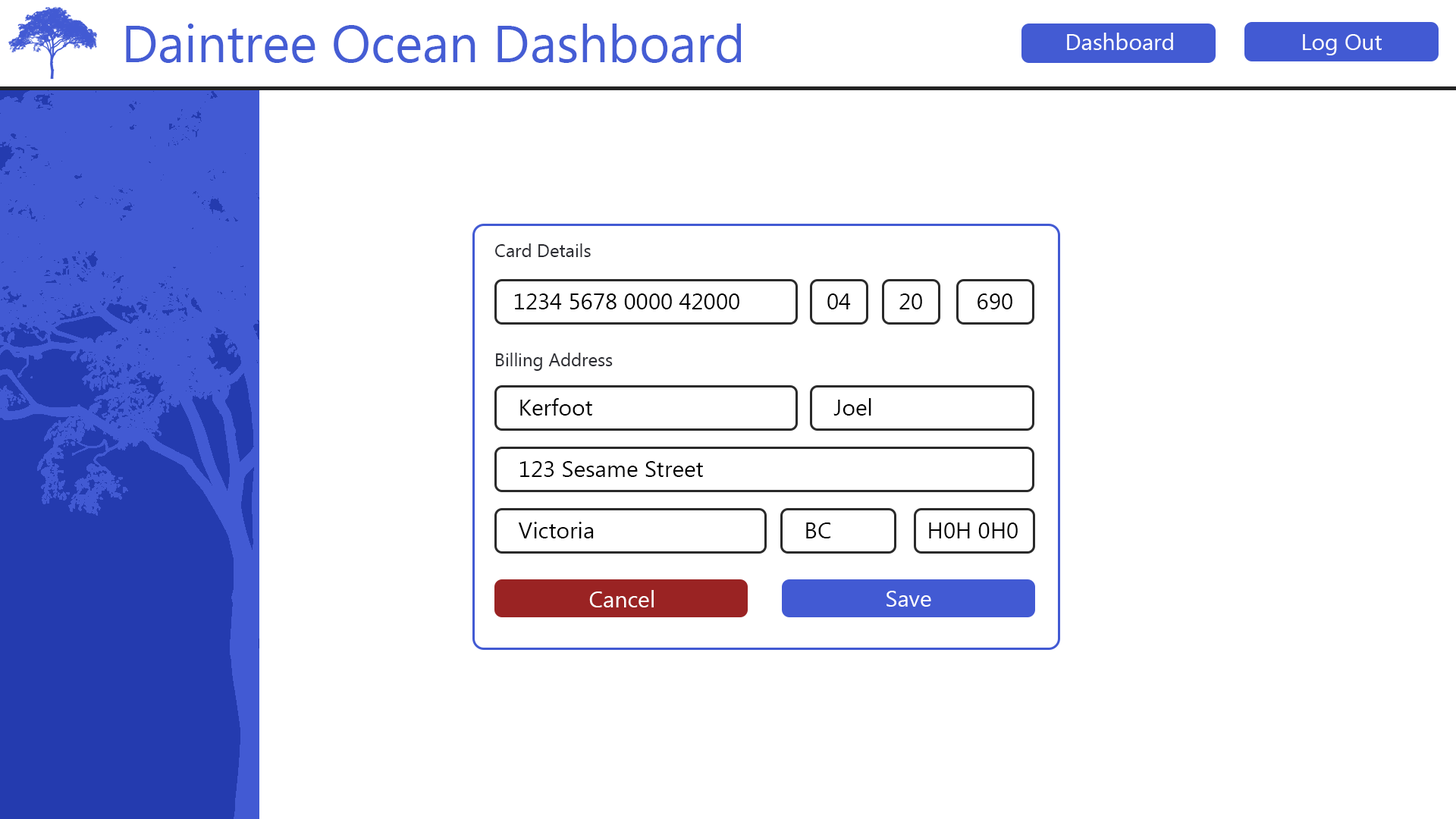
<style>
.page{position:relative;width:1456px;height:819px;background:#ffffff}
.page>*{position:absolute;margin:0}
.t1{font:52.3px "MyanmarText";color:#455dd4}
.t2{font:22.7px "MyanmarText";color:#ffffff}
.t3{font:18.2px "MyanmarText";color:#2c2d33}
.t4{font:22.7px "MyanmarText";color:#2c2d33}
.t5{font:22.7px "MyanmarText";color:#000000}
.t6{font:4.5px "MyanmarText";color:#656568}
</style>
<div class="page">
<p class="t1" style="left:126px;top:24px;width:615px;height:39px">Daintree Ocean Dashboard</p>
<p class="t2" style="left:1067px;top:33px;width:106px;height:17px">Dashboard</p>
<p class="t2" style="left:1303px;top:34px;width:79px;height:21px">Log Out</p>
<p class="t3" style="left:495px;top:243px;width:118px;height:128px"><span class="t4"> <br></span> Card Details<br><br><br> <br><br> Billing Address</p>
<p class="t5" style="left:515px;top:293px;width:224px;height:16px"><span class="t6"><br>   </span>1234 5678 0000 42000</p>
<p class="t5" style="left:827px;top:293px;width:24px;height:16px"><span class="t6"><br></span>04</p>
<p class="t5" style="left:899px;top:293px;width:23px;height:16px"><span class="t6"><br></span>20</p>
<p class="t5" style="left:977px;top:293px;width:35px;height:16px"><span class="t6"><br></span>690</p>
<p class="t5" style="left:520px;top:398px;width:72px;height:18px"><span class="t6"><br>   </span>Kerfoot</p>
<p class="t5" style="left:833px;top:398px;width:38px;height:18px"><span class="t6"><br>   </span>Joel</p>
<p class="t5" style="left:520px;top:461px;width:183px;height:16px"><span class="t6"><br>   </span>123 Sesame Street</p>
<p class="t5" style="left:518px;top:522px;width:76px;height:16px"><span class="t6"><br>   </span>Victoria</p>
<p class="t5" style="left:806px;top:522px;width:24px;height:16px"><span class="t6"><br>   </span>BC</p>
<p class="t5" style="left:929px;top:522px;width:89px;height:16px"><span class="t6"><br>   </span>H0H 0H0</p>
<p class="t2" style="left:589px;top:590px;width:65px;height:17px">Cancel</p>
<p class="t2" style="left:886px;top:591px;width:45px;height:16px">Save</p>
</div>
